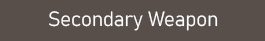
<style>
.page{position:relative;width:265px;height:41px;background:#584f4a}
.page>*{position:absolute;margin:0}
.t1{font:20.4px "Bahnschrift-Light";color:#ffffff;font-style:italic}
</style>
<div class="page">
<p class="t1" style="left:49px;top:11px;width:169px;height:20px">Secondary Weapon</p>
</div>
